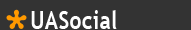
<style>
.page{position:relative;width:191px;height:30px;background:#333333}
.page>*{position:absolute;margin:0}
.t1{font:25px "TrebuchetMS-Bold";letter-spacing:0.01em;color:#ffffff;scale:0.85 1}
</style>
<div class="page">
<p class="t1" style="left:31px;top:10px;width:86px;height:19px">UASocial</p>
</div>
